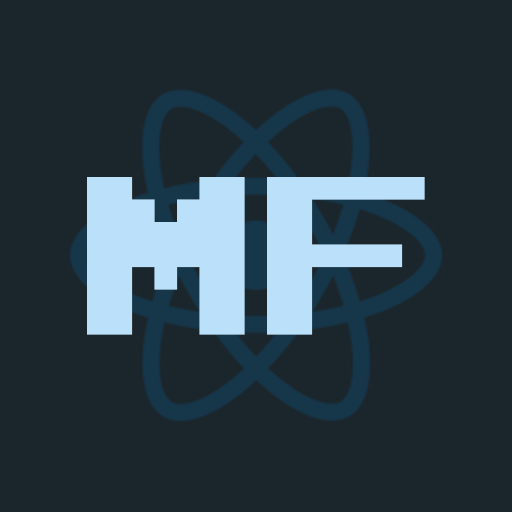
<style>
.page{position:relative;width:512px;height:512px;background:#1b262c}
.page>*{position:absolute;margin:0}
.t1{font:180px "PressStart2P";color:#bbe1fa}
</style>
<div class="page">
<p class="t1" style="left:87px;top:177px;width:338px;height:158px">MF</p>
</div>
